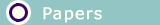
<style>
.page{position:relative;width:160px;height:25px;background:#94c5c5}
.page>*{position:absolute;margin:0}
.t1{font:16px "Verdana";letter-spacing:0.055em;color:#fffff0;font-weight:bold}
</style>
<div class="page">
<p class="t1" style="left:43px;top:7px;width:59px;height:16px">Papers</p>
</div>
